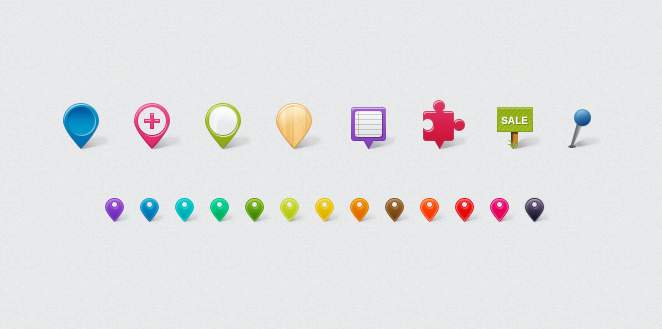
<style>
.page{position:relative;width:662px;height:329px}
.page>*{position:absolute;margin:0}
.t1{font:10px "Arial-BoldMT";color:#f8f8f8;text-transform:uppercase}
</style>
<div class="page">
<p class="t1" style="left:501px;top:116px;width:27px;height:8px">Sale</p>
</div>
